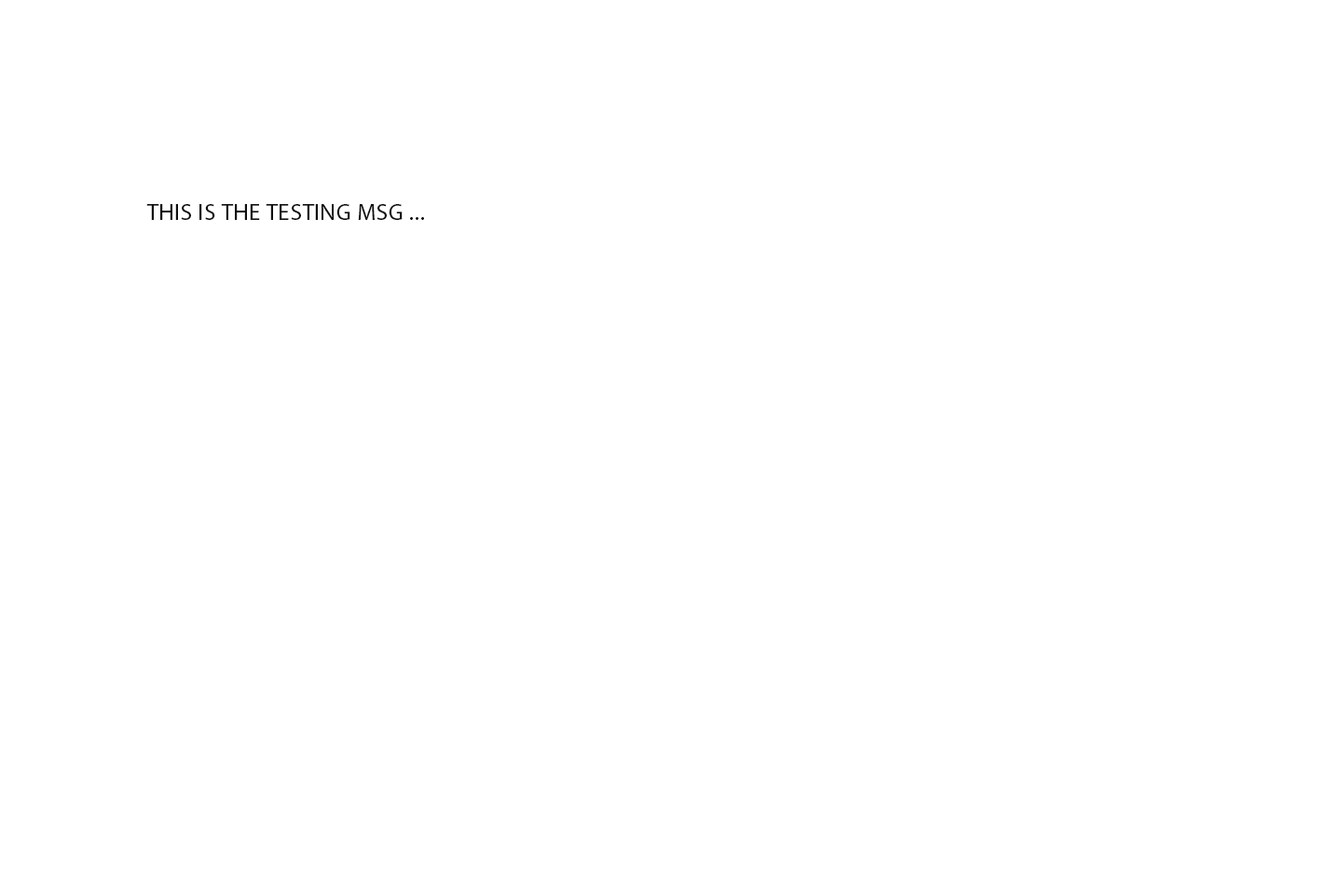
<style>
.page{position:relative;width:1342px;height:889px;background:#ffffff}
.page>*{position:absolute;margin:0}
.t1{font:23.3px "MyriadPro-Regular";letter-spacing:0.02em;color:#0d0e0e;text-transform:uppercase}
</style>
<div class="page">
<p class="t1" style="left:146px;top:204px;width:278px;height:16px">This is the testing msg ...</p>
</div>
